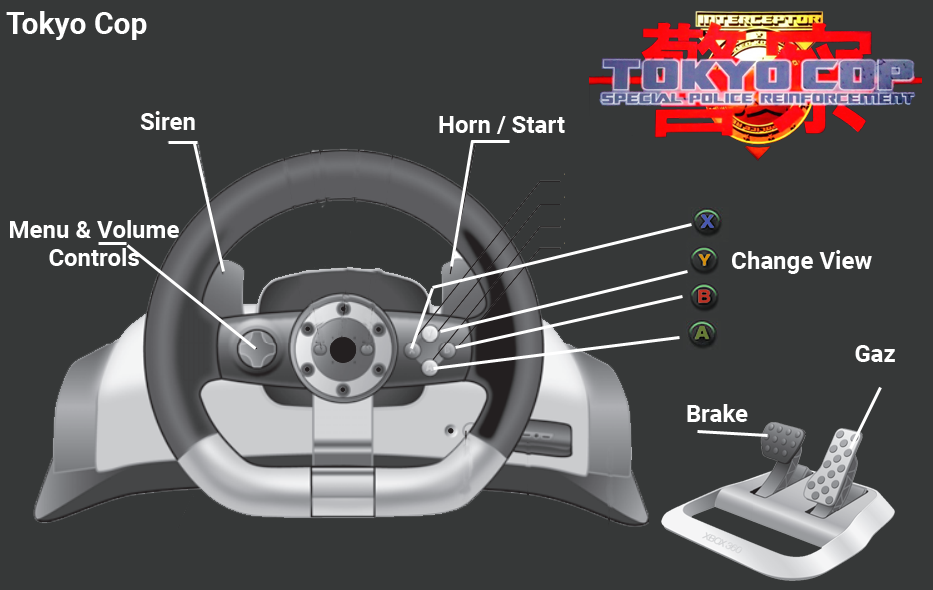
<style>
.page{position:relative;width:933px;height:590px;background:#363838}
.page>*{position:absolute;margin:0}
.t1{font:30px "Roboto-Bold";color:#ffffff}
.t2{font:24px "Roboto-Bold";color:#ffffff}
.t3{font:24px/28px "Roboto-Bold";color:#ffffff}
</style>
<div class="page">
<p class="t1" style="left:6px;top:11px;width:141px;height:29px">Tokyo Cop</p>
<p class="t2" style="left:140px;top:111px;width:55px;height:19px">Siren</p>
<p class="t2" style="left:439px;top:116px;width:126px;height:18px">Horn / Start</p>
<p class="t3" style="left:10px;top:220px;width:169px;height:46px;text-align:center">Menu &amp; Volume<br>Controls</p>
<p class="t2" style="left:732px;top:250px;width:140px;height:24px">Change View</p>
<p class="t2" style="left:855px;top:345px;width:40px;height:17px">Gaz</p>
<p class="t2" style="left:687px;top:404px;width:61px;height:18px">Brake</p>
</div>
